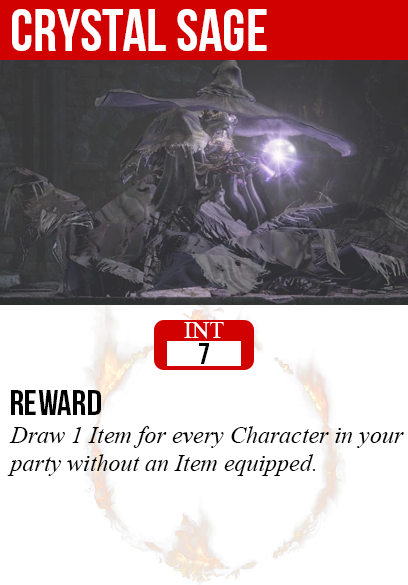
<style>
.page{position:relative;width:408px;height:585px;background:#ffffff}
.page>*{position:absolute;margin:0}
.t1{font:60px "BebasNeue";color:#ffffff}
.t2{font:24px "TimesNewRomanPSMT";color:#ffffff}
.t3{font:30px "BebasNeue";color:#000000}
.t4{font:36px "BebasNeue";color:#000000}
.t5{font:24px "TimesNewRomanPS-ItalicMT";color:#000000}
</style>
<div class="page">
<p class="t1" style="left:12px;top:9px;width:255px;height:42px">crystal sage</p>
<p class="t2" style="left:184px;top:322px;width:40px;height:17px">INT</p>
<p class="t3" style="left:199px;top:343px;width:10px;height:21px">7</p>
<p class="t4" style="left:11px;top:390px;width:90px;height:25px">reward</p>
<p class="t5" style="left:7px;top:426px;width:397px;height:50px">Draw 1 Item for every Character in your<br>party without an Item equipped.</p>
</div>
